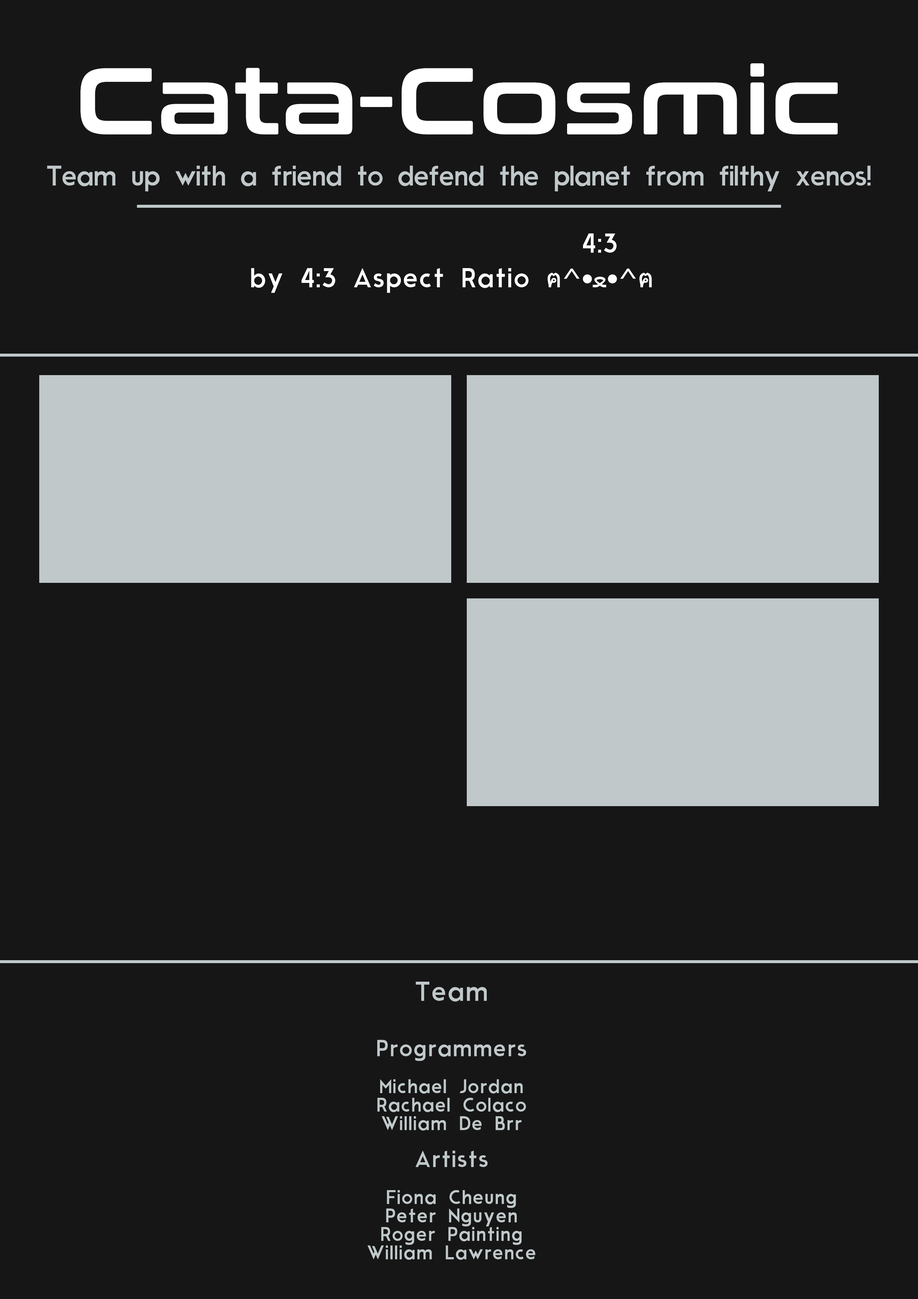
<style>
.page{position:relative;width:918px;height:1299px;background:#161616}
.page>*{position:absolute;margin:0}
.t1{font:94.4px "ConthraxSb-Regular";letter-spacing:0.02em;color:#ffffff}
.t2{font:26.7px "ModernSans";letter-spacing:-0.05em;color:#c0c8ca}
.t3{font:25.6px "ModernSans";letter-spacing:0.02em;color:#fefefe}
.t4{font:25.6px "ModernSans";letter-spacing:0.02em;color:#ffffff}
.t5{font:25.6px "Tahoma";letter-spacing:0.02em;color:#ffffff}
.t6{font:18.5px/18.5px "ModernSans";letter-spacing:0.02em;color:#c0c8ca}
.t7{font:25.6px/18.5px "ModernSans";letter-spacing:0.02em;color:#c0c8ca}
.t8{font:21.8px/18.5px "ModernSans";letter-spacing:0.02em;color:#c0c8ca}
</style>
<div class="page">
<p class="t1" style="left:80px;top:63px;width:758px;height:71px">Cata-Cosmic</p>
<p class="t2" style="left:47px;top:165px;width:824px;height:26px">Team up with a friend to defend the planet from filthy xenos!</p>
<p class="t3" style="left:583px;top:233px;width:34px;height:20px">4:3</p>
<p class="t4" style="left:251px;top:268px;width:401px;height:25px">by 4:3 Aspect Ratio <span class="t5">ฅ^•ﻌ•^ฅ</span></p>
<p class="t6" style="left:368px;top:981px;width:167px;height:278px;text-align:center"><span class="t7">Team<br><br><br></span><span class="t8">Programmers<br><br></span>Michael Jordan<br>Rachael Colaco<br>William De Brr<br><br><span class="t8">Artists<br><br></span>Fiona Cheung<br>Peter Nguyen<br>Roger Painting<br>William Lawrence</p>
</div>
